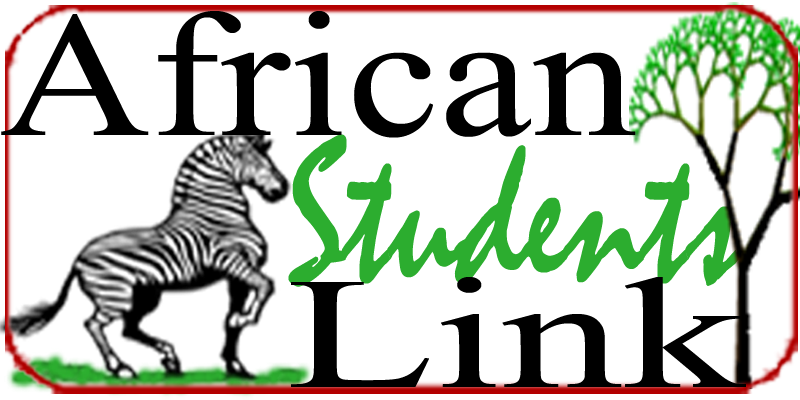
<style>
.page{position:relative;width:800px;height:400px;background:#ffffff}
.page>*{position:absolute;margin:0}
.t1{font:178.5px "TimesNewRomanPSMT";color:#000000;scale:1.17 1}
.t2{font:205.4px "Mistral";color:#2cad2f;scale:0.81 1}
.t3{font:158.4px "TimesNewRomanPSMT";color:#000000;scale:1.53 1}
</style>
<div class="page">
<p class="t1" style="left:1px;top:11px;width:635px;height:127px">African</p>
<p class="t2" style="left:288px;top:134px;width:451px;height:153px">Students</p>
<p class="t3" style="left:291px;top:277px;width:455px;height:110px">Link</p>
</div>
